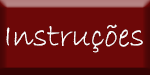
<style>
.page{position:relative;width:150px;height:75px;background:#6d0808}
.page>*{position:absolute;margin:0}
.t1{font:33.3px "BradleyHandITC";color:#fbfbfb}
</style>
<div class="page">
<p class="t1" style="left:6px;top:24px;width:137px;height:29px">Instruções</p>
</div>
